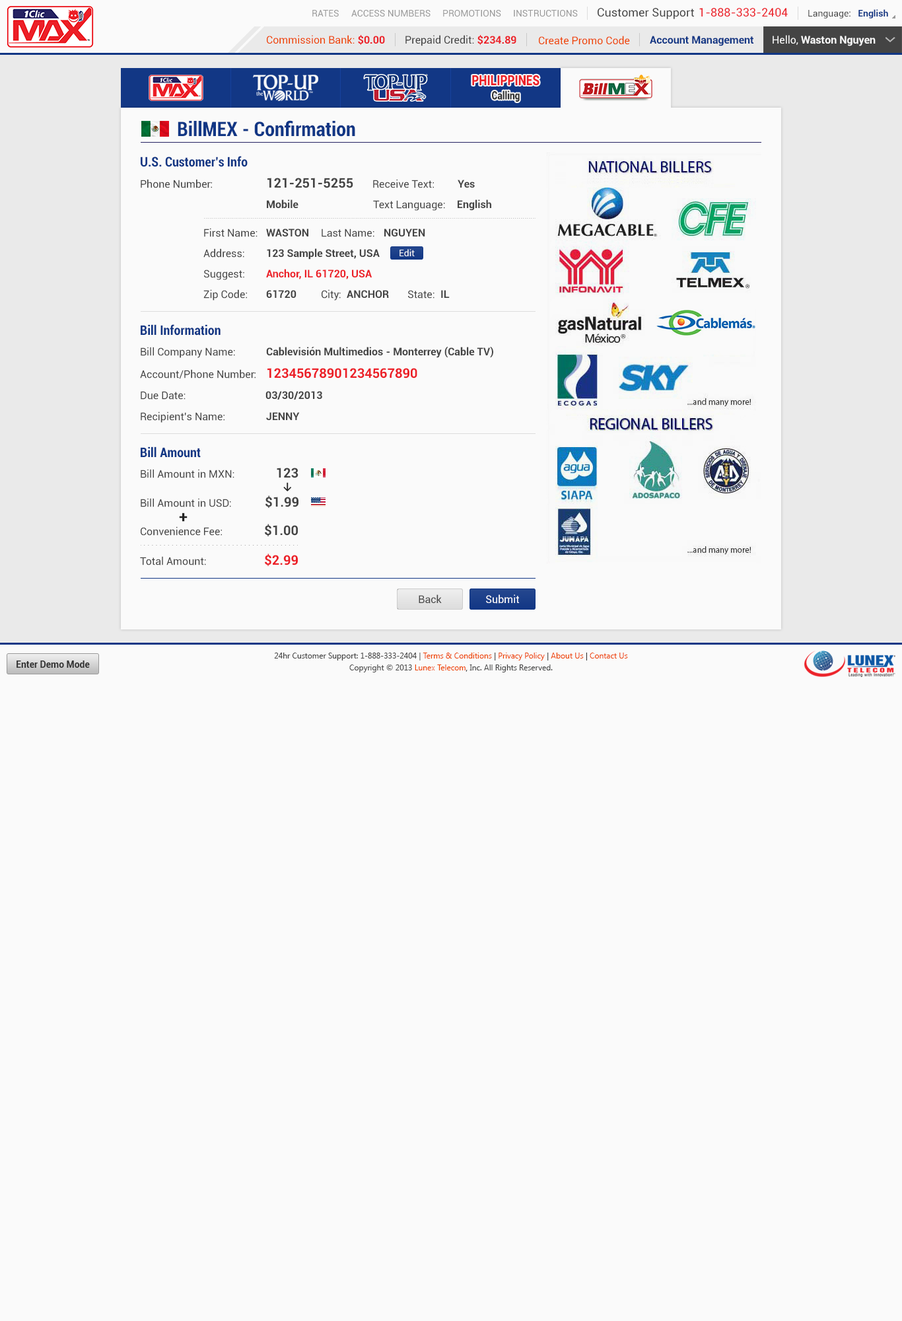
<style>
.page{position:relative;width:902px;height:1321px;background:#fafafa}
.page>*{position:absolute;margin:0}
.t1{font:9.2px "Roboto-Regular";color:#999999}
.t2{font:11.6px "Roboto-Regular";color:#444444}
.t3{font:11.6px "Roboto-Regular";color:#ec2029}
.t4{font:9.2px "Roboto-Regular";color:#444444}
.t5{font:9.2px "Roboto-Bold";color:#123785}
.t6{font:10.6px "Roboto-Regular";color:#ee4400}
.t7{font:10.6px "Roboto-Bold";color:#ec2028}
.t8{font:10.6px "Roboto-Regular";color:#444444}
.t9{font:10.6px "Roboto-Bold";color:#123785}
.t10{font:10.6px "Roboto-Bold";color:#fafafa}
.t11{font:10.6px "Roboto-Regular";color:#fafafa}
.t12{font:14.1px "Roboto-Black";color:#ec2028;scale:0.81 1}
.t13{font:11.3px "Roboto-Black";color:#333333;scale:0.81 1}
.t14{font:19.8px "Roboto-BoldCondensed";color:#123785}
.t15{font:13.2px "Roboto-BoldCondensed";color:#123785}
.t16{font:13.2px "Roboto-Bold";color:#444444}
.t17{font:10.6px "Roboto-Bold";color:#444444}
.t18{font:9.2px "Roboto-Regular";color:#fafafa}
.t19{font:13.2px "Roboto-Bold";color:#ec2028}
.t20{font:10.6px "Calibri-Bold";color:#222222}
.t21{font:15.9px "Roboto-Bold";color:#222222}
.t22{font:10.6px "Roboto-Regular";color:#ffffff}
.t23{font:7.9px/11.9px "SegoeUI";color:#444444}
.t24{font:7.9px/11.9px "SegoeUI";color:#ee4400}
.t25{font:7.9px/11.9px "SegoeUI";color:#333333}
.t26{font:9.2px "Roboto-Bold";color:#333333}
</style>
<div class="page">
<p class="t1" style="left:312px;top:10px;width:27px;height:7px">RATES</p>
<p class="t1" style="left:351px;top:10px;width:80px;height:7px">ACCESS NUMBERS</p>
<p class="t1" style="left:443px;top:10px;width:58px;height:7px">PROMOTIONS</p>
<p class="t1" style="left:514px;top:10px;width:64px;height:7px">INSTRUCTIONS</p>
<p class="t2" style="left:598px;top:8px;width:96px;height:11px">Customer Support</p>
<p class="t3" style="left:700px;top:8px;width:88px;height:9px">1-888-333-2404</p>
<p class="t4" style="left:809px;top:9px;width:80px;height:9px">Language:   <span class="t5">English</span></p>
<p class="t6" style="left:267px;top:35px;width:118px;height:10px">Commission Bank: <span class="t7">$0.00</span></p>
<p class="t8" style="left:406px;top:35px;width:111px;height:11px">Prepaid Credit: <span class="t7">$234.89</span></p>
<p class="t6" style="left:539px;top:36px;width:91px;height:9px">Create Promo Code</p>
<p class="t9" style="left:650px;top:36px;width:104px;height:10px">Account Management</p>
<p class="t10" style="left:773px;top:35px;width:103px;height:11px"><span class="t11">Hello, </span>Waston Nguyen</p>
<p class="t12" style="left:472px;top:75px;width:68px;height:11px">PHILIPPINES</p>
<p class="t13" style="left:492px;top:91px;width:28px;height:11px">Calling</p>
<p class="t14" style="left:178px;top:120px;width:177px;height:17px">BillMEX - Confirmation</p>
<p class="t15" style="left:141px;top:156px;width:107px;height:11px">U.S. Customer’s Info</p>
<p class="t8" style="left:141px;top:179px;width:71px;height:9px">Phone Number:</p>
<p class="t16" style="left:268px;top:178px;width:85px;height:10px">121-251-5255</p>
<p class="t8" style="left:373px;top:179px;width:61px;height:9px">Receive Text:</p>
<p class="t17" style="left:458px;top:180px;width:17px;height:8px">Yes</p>
<p class="t17" style="left:267px;top:200px;width:32px;height:9px">Mobile</p>
<p class="t8" style="left:373px;top:200px;width:72px;height:11px">Text Language:</p>
<p class="t17" style="left:458px;top:200px;width:34px;height:11px">English</p>
<p class="t8" style="left:204px;top:228px;width:54px;height:9px">First Name:</p>
<p class="t17" style="left:266px;top:229px;width:43px;height:8px">WASTON</p>
<p class="t8" style="left:322px;top:229px;width:53px;height:8px">Last Name:</p>
<p class="t17" style="left:385px;top:229px;width:40px;height:8px">NGUYEN</p>
<p class="t8" style="left:203px;top:248px;width:41px;height:10px">Address:</p>
<p class="t17" style="left:267px;top:248px;width:113px;height:12px">123 Sample Street, USA</p>
<p class="t18" style="left:400px;top:249px;width:15px;height:7px">Edit</p>
<p class="t8" style="left:204px;top:270px;width:40px;height:10px">Suggest:</p>
<p class="t7" style="left:266px;top:269px;width:106px;height:10px">Anchor, IL 61720, USA</p>
<p class="t8" style="left:203px;top:289px;width:44px;height:12px">Zip Code:</p>
<p class="t17" style="left:266px;top:290px;width:31px;height:8px">61720</p>
<p class="t8" style="left:322px;top:289px;width:19px;height:12px">City:</p>
<p class="t17" style="left:347px;top:290px;width:42px;height:8px">ANCHOR</p>
<p class="t8" style="left:408px;top:290px;width:27px;height:9px">State:</p>
<p class="t17" style="left:441px;top:290px;width:9px;height:8px">IL</p>
<p class="t15" style="left:141px;top:324px;width:80px;height:12px">Bill Information</p>
<p class="t8" style="left:141px;top:347px;width:94px;height:11px">Bill Company Name:</p>
<p class="t17" style="left:266px;top:346px;width:228px;height:12px">Cablevisión Multimedios - Monterrey (Cable TV)</p>
<p class="t8" style="left:140px;top:369px;width:116px;height:10px">Account/Phone Number:</p>
<p class="t19" style="left:268px;top:368px;width:150px;height:11px">12345678901234567890</p>
<p class="t8" style="left:141px;top:391px;width:45px;height:9px">Due Date:</p>
<p class="t17" style="left:266px;top:391px;width:56px;height:9px">03/30/2013</p>
<p class="t8" style="left:141px;top:412px;width:84px;height:11px">Recipient’s Name:</p>
<p class="t17" style="left:266px;top:412px;width:34px;height:8px">JENNY</p>
<p class="t15" style="left:141px;top:447px;width:60px;height:11px">Bill Amount</p>
<p class="t8" style="left:141px;top:469px;width:94px;height:9px">Bill Amount in MXN:</p>
<p class="t16" style="left:277px;top:468px;width:22px;height:10px">123</p>
<p class="t20" style="left:283px;top:482px;width:8px;height:10px">↓</p>
<p class="t16" style="left:266px;top:495px;width:33px;height:13px">$1.99</p>
<p class="t8" style="left:141px;top:498px;width:90px;height:9px">Bill Amount in USD:</p>
<p class="t21" style="left:179px;top:513px;width:9px;height:9px">+</p>
<p class="t8" style="left:141px;top:527px;width:81px;height:9px">Convenience Fee:</p>
<p class="t16" style="left:265px;top:524px;width:33px;height:12px">$1.00</p>
<p class="t8" style="left:140px;top:556px;width:66px;height:10px">Total Amount:</p>
<p class="t19" style="left:265px;top:554px;width:33px;height:12px">$2.99</p>
<p class="t8" style="left:419px;top:595px;width:23px;height:9px">Back</p>
<p class="t22" style="left:486px;top:595px;width:34px;height:9px">Submit</p>
<p class="t23" style="left:274px;top:653px;width:354px;height:20px;text-align:center">24hr Customer Support: 1-888-333-2404 | <span class="t24">Terms &amp; Conditions</span><span class="t25"> | </span><span class="t24">Privacy Policy</span><span class="t25"> | </span><span class="t24">About Us</span><span class="t25"> | </span><span class="t24">Contact Us<br></span>Copyright © 2013 <span class="t24">Lunex Telecom</span><span class="t25">,</span> Inc. All Rights Reserved.</p>
<p class="t26" style="left:17px;top:661px;width:73px;height:7px">Enter Demo Mode</p>
</div>
